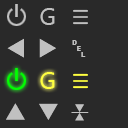
<style>
.page{position:relative;width:128px;height:128px;background:#292929}
.page>*{position:absolute;margin:0}
.t1{font:24px "SegoeUISymbol";color:#c0c0c0}
.t2{font:20px "SegoeUISymbol";color:#c0c0c0}
.t3{font:30px "SegoeUISymbol";color:#c0c0c0}
.t4{font:24px "SegoeUISymbol";color:#ffff40}
.t5{font:20px "SegoeUISymbol";color:#ffff40}
.t6{font:14px "SegoeUISymbol";color:#c0c0c0}
</style>
<div class="page">
<p class="t1" style="left:40px;top:8px;width:15px;height:17px">G</p>
<p class="t2" style="left:73px;top:9px;width:15px;height:16px">☰</p>
<p class="t3" style="left:7px;top:38px;width:17px;height:20px">⯇</p>
<p class="t3" style="left:39px;top:38px;width:17px;height:20px">⯈</p>
<p class="t1" style="left:72px;top:40px;width:14px;height:17px">␡</p>
<p class="t4" style="left:40px;top:72px;width:15px;height:17px">G</p>
<p class="t5" style="left:73px;top:73px;width:15px;height:16px">☰</p>
<p class="t3" style="left:6px;top:103px;width:19px;height:17px">⯅</p>
<p class="t3" style="left:39px;top:103px;width:19px;height:17px">⯆</p>
<p class="t6" style="left:75px;top:113px;width:9px;height:8px">⯅</p>
<p class="t6" style="left:75px;top:104px;width:9px;height:8px">⯆</p>
</div>
